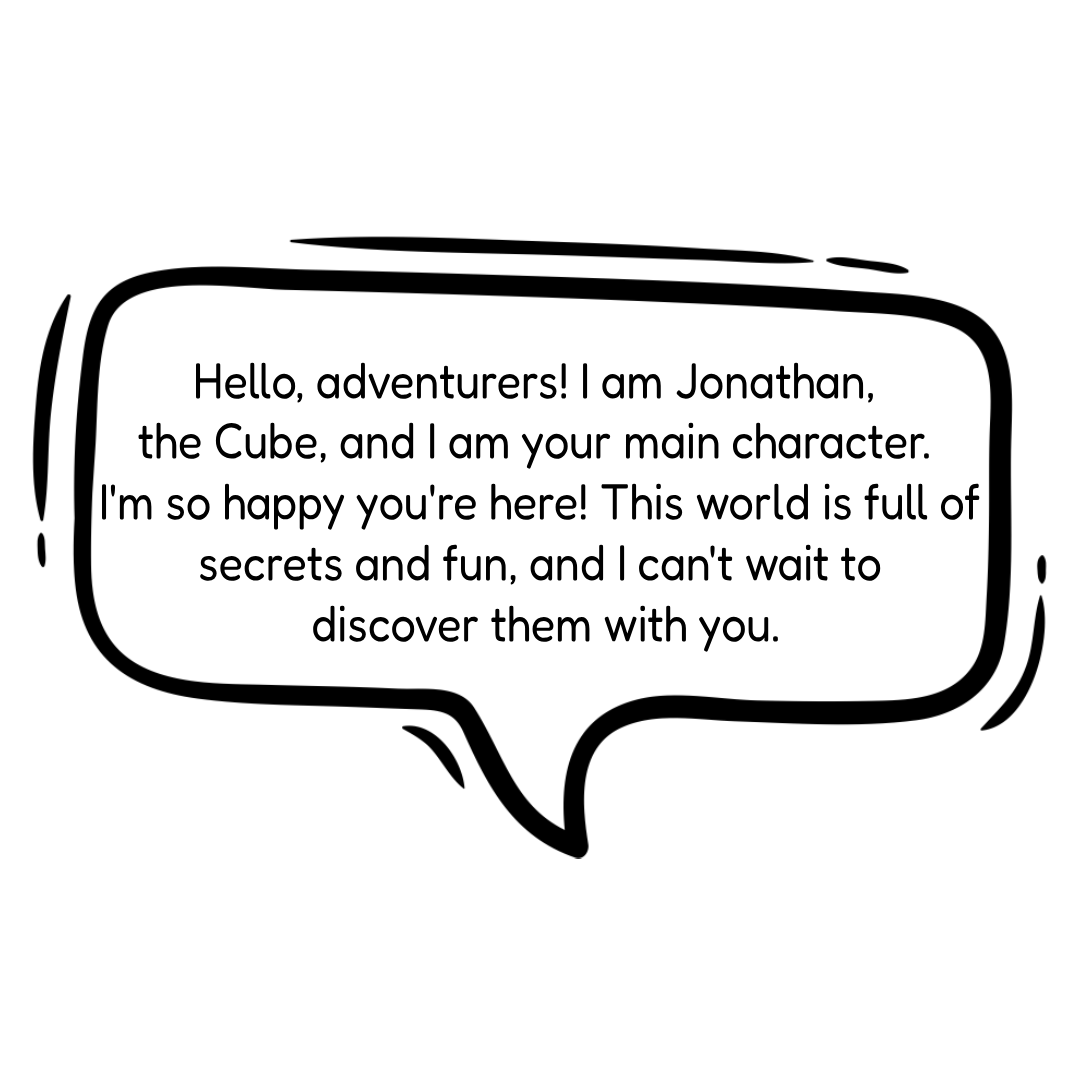
<style>
.page{position:relative;width:1080px;height:1080px;background:#ffffff}
.page>*{position:absolute;margin:0}
.t1{font:50.6px "Fredoka-Regular";color:#000000;scale:0.89 1}
</style>
<div class="page">
<p class="t1" style="left:102px;top:362px;width:878px;height:290px;text-align:center">Hello, adventurers! I am Jonathan, <br>the Cube, and I am your main character. <br>I'm so happy you're here! This world is full of<br>secrets and fun, and I can't wait to<br> discover them with you.</p>
</div>
